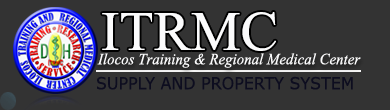
<style>
.page{position:relative;width:390px;height:110px;background:#333333}
.page>*{position:absolute;margin:0}
.t1{font:83.3px "MicrosoftHimalaya";color:#fbfbfc}
.t2{font:19.4px "Vijaya";color:#fbfbfc;scale:0.95 1}
.t3{font:16.7px "Verdana";color:#0d0d1f;scale:0.95 1}
</style>
<div class="page">
<p class="t1" style="left:102px;top:12px;width:174px;height:39px">ITRMC</p>
<p class="t2" style="left:97px;top:53px;width:264px;height:15px">Ilocos Training &amp; Regional Medical Center</p>
<p class="t3" style="left:97px;top:76px;width:256px;height:14px">SUPPLY AND PROPERTY SYSTEM</p>
</div>
